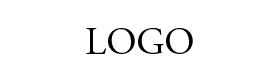
<style>
.page{position:relative;width:274px;height:77px;background:#ffffff}
.page>*{position:absolute;margin:0}
.t1{font:38px "AGaramondPro-Regular";color:#000000}
</style>
<div class="page">
<p class="t1" style="left:86px;top:28px;width:107px;height:26px">LOGO</p>
</div>
